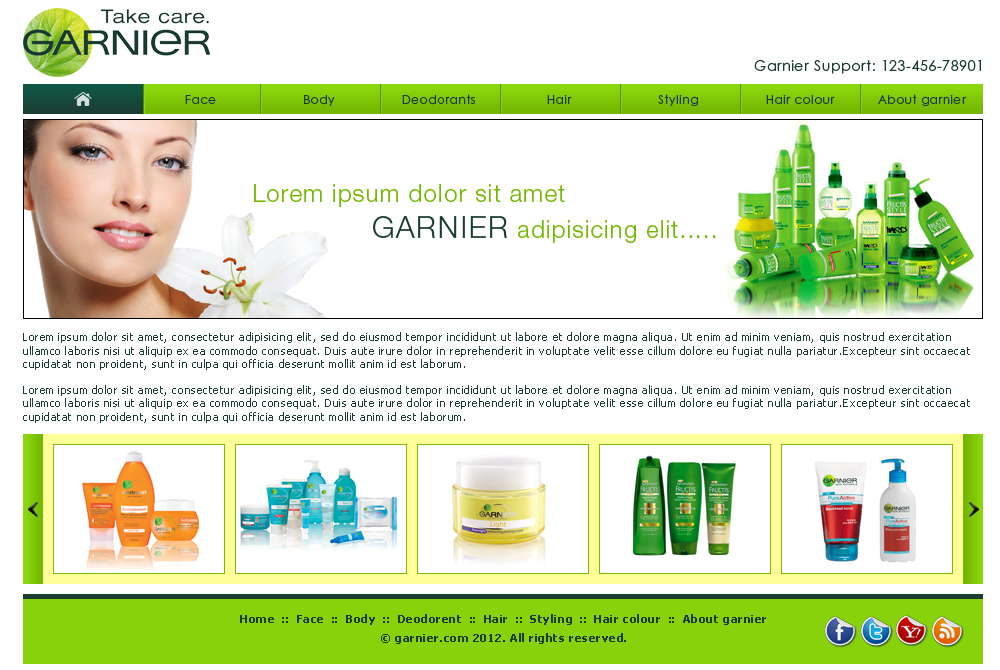
<style>
.page{position:relative;width:1000px;height:670px;background:#ffffff}
.page>*{position:absolute;margin:0}
.t1{font:14px "CenturyGothicStd";letter-spacing:0.05em;color:#1b3c33}
.t2{font:12px "CenturyGothicStd";letter-spacing:0.05em;color:#1b3c33}
.t3{font:24px "HelveticaNeue-Light";letter-spacing:0.05em;color:#74b801}
.t4{font:30px "HelveticaNeue-Light";letter-spacing:0.05em;color:#1b3c33}
.t5{font:11px "Tahoma";letter-spacing:0.05em;color:#1b3c33}
.t6{font:11px "Tahoma-Bold";letter-spacing:0.05em;color:#1b3c33}
</style>
<div class="page">
<p class="t1" style="left:754px;top:60px;width:227px;height:14px">Garnier Support: 123-456-78901</p>
<p class="t2" style="left:185px;top:94px;width:782px;height:12px">Face                      Body                 Deodorants                  Hair                      Styling                 Hair colour           About garnier</p>
<p class="t3" style="left:254px;top:184px;width:462px;height:59px">Lorem ipsum dolor sit amet <br>              <span class="t4"> GARNIER</span> adipisicing elit.....</p>
<p class="t5" style="left:23px;top:332px;width:947px;height:91px">Lorem ipsum dolor sit amet, consectetur adipisicing elit, sed do eiusmod tempor incididunt ut labore et dolore magna aliqua. Ut enim ad minim veniam, quis nostrud exercitation ullamco laboris nisi ut aliquip ex ea commodo consequat. Duis aute irure dolor in reprehenderit in voluptate velit esse cillum dolore eu fugiat nulla pariatur.Excepteur sint occaecat cupidatat non proident, sunt in culpa qui officia deserunt mollit anim id est laborum.<br><br>Lorem ipsum dolor sit amet, consectetur adipisicing elit, sed do eiusmod tempor incididunt ut labore et dolore magna aliqua. Ut enim ad minim veniam, quis nostrud exercitation ullamco laboris nisi ut aliquip ex ea commodo consequat. Duis aute irure dolor in reprehenderit in voluptate velit esse cillum dolore eu fugiat nulla pariatur.Excepteur sint occaecat cupidatat non proident, sunt in culpa qui officia deserunt mollit anim id est laborum.</p>
<p class="t6" style="left:240px;top:614px;width:526px;height:11px">Home  ::  Face  ::  Body  ::  Deodorent  ::  Hair  ::  Styling  ::  Hair colour  ::  About garnier</p>
<p class="t6" style="left:381px;top:633px;width:245px;height:11px">© garnier.com 2012. All rights reserved.</p>
</div>
